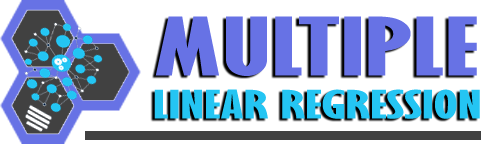
<style>
.page{position:relative;width:487px;height:144px;background:#ffffff}
.page>*{position:absolute;margin:0}
.t1{font:35.9px "GillSansMT-ExtraCondensedBold";color:#24c5f3;scale:2.07 1}
.t2{font:74px "GillSansMT-ExtraCondensedBold";color:#6772e5;scale:2.07 1}
</style>
<div class="page">
<p class="t1" style="left:154px;top:16px;width:326px;height:103px"><span class="t2">MULTIPLE<br></span>LINEAR REGRESSION</p>
</div>
